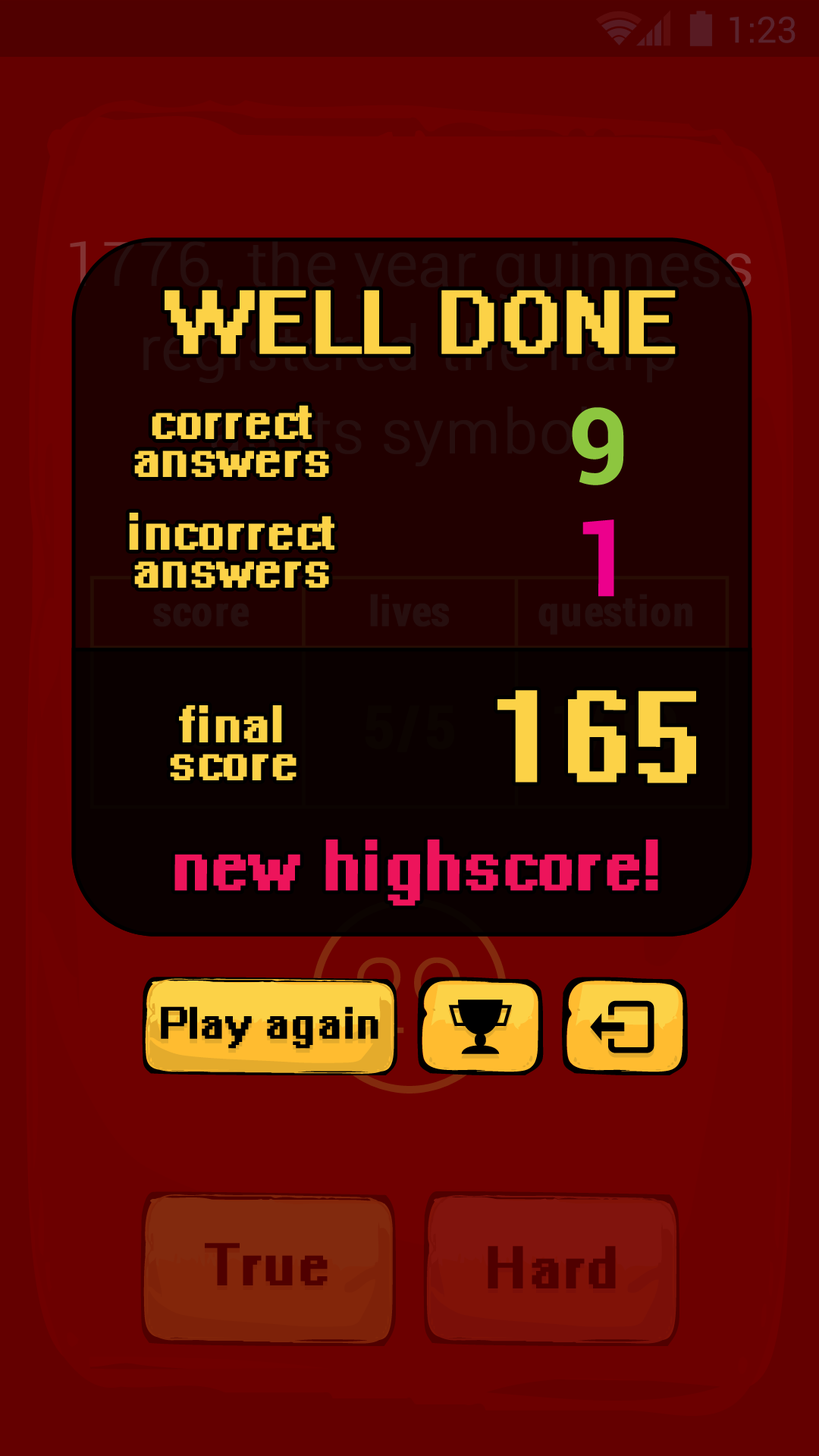
<style>
.page{position:relative;width:819px;height:1456px}
.page>*{position:absolute;margin:0}
.t1{font:79.9px "System";letter-spacing:0.02em;color:#fcd247;font-weight:bold}
.t2{font:46.6px/37.9px "System";letter-spacing:0.02em;color:#fcd247;font-weight:bold}
.t3{font:105.7px "Roboto-Bold";letter-spacing:0.02em;color:#8dc63f;font-weight:bold}
.t4{font:105.7px "Roboto-Bold";letter-spacing:0.02em;color:#ec008c;font-weight:bold}
.t5{font:115.3px "System";letter-spacing:0.02em;color:#fcd247;font-weight:bold}
.t6{font:64.1px "System";letter-spacing:0.02em;color:#ed145b;font-weight:bold}
.t7{font:40.1px "System";letter-spacing:0.02em;color:#000000;font-weight:bold}
</style>
<div class="page">
<p class="t1" style="left:165px;top:290px;width:511px;height:64px">WELL DONE</p>
<p class="t2" style="left:134px;top:405px;width:195px;height:72px;text-align:center">correct<br>answers</p>
<p class="t3" style="left:572px;top:407px;width:52px;height:78px">9</p>
<p class="t2" style="left:129px;top:513px;width:205px;height:75px;text-align:center">incorrect<br>answers</p>
<p class="t4" style="left:582px;top:519px;width:32px;height:78px">1</p>
<p class="t5" style="left:497px;top:690px;width:199px;height:93px">165</p>
<p class="t2" style="left:170px;top:705px;width:127px;height:75px;text-align:center">final<br>score</p>
<p class="t6" style="left:174px;top:839px;width:484px;height:67px">new highscore!</p>
<p class="t7" style="left:161px;top:1006px;width:217px;height:43px">Play again</p>
</div>
